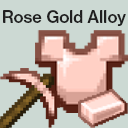
<style>
.page{position:relative;width:128px;height:128px;background:#ccd9d3}
.page>*{position:absolute;margin:0}
.t1{font:16.5px "NHaasGroteskTXPro-65Md";color:#202020}
</style>
<div class="page">
<p class="t1" style="left:3px;top:10px;width:123px;height:16px">Rose Gold Alloy</p>
</div>
